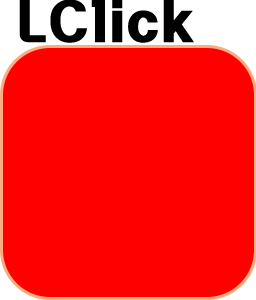
<style>
.page{position:relative;width:256px;height:300px;background:#ff0000}
.page>*{position:absolute;margin:0}
.t1{font:48px "HeadlineR-HM";color:#000000}
</style>
<div class="page">
<p class="t1" style="left:19px;top:0px;width:175px;height:43px">LClick</p>
</div>
